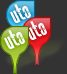
<style>
.page{position:relative;width:67px;height:74px;background:#333333}
.page>*{position:absolute;margin:0}
.t1{font:8px "Rockit";color:#ffffff}
</style>
<div class="page">
<p class="t1" style="left:10px;top:4px;width:21px;height:19px;rotate:-26deg">uto</p>
<p class="t1" style="left:4px;top:30px;width:21px;height:19px;rotate:-26deg">uto</p>
<p class="t1" style="left:26px;top:21px;width:21px;height:19px;rotate:-26deg">uto</p>
</div>
